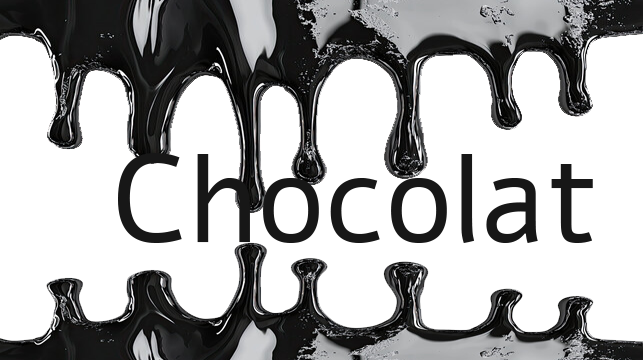
<style>
.page{position:relative;width:643px;height:360px;background:#ffffff}
.page>*{position:absolute;margin:0}
.t1{font:125px "Alef-Regular";color:#171717}
</style>
<div class="page">
<p class="t1" style="left:118px;top:153px;width:475px;height:90px">Chocolate</p>
</div>
